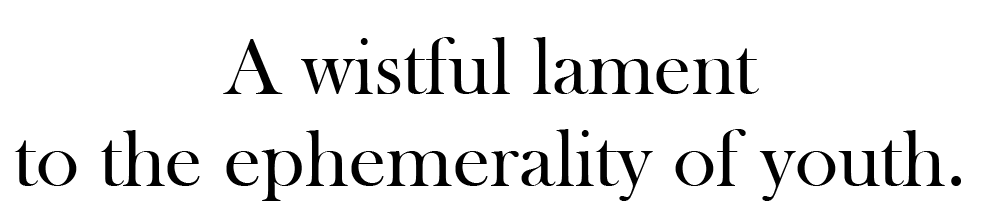
<style>
.page{position:relative;width:1000px;height:224px;background:#ffffff}
.page>*{position:absolute;margin:0}
.t1{font:83.3px/91.7px "BaskOldFace";color:#000000}
</style>
<div class="page">
<p class="t1" style="left:14px;top:37px;width:947px;height:164px;text-align:center">A wistful lament<br>to the ephemerality of youth.</p>
</div>
